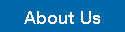
<style>
.page{position:relative;width:125px;height:32px;background:#0069aa}
.page>*{position:absolute;margin:0}
.t1{font:18px "HelveticaNeueLTCom-Md";color:#ffffff}
</style>
<div class="page">
<p class="t1" style="left:24px;top:11px;width:76px;height:13px">About Us</p>
</div>
